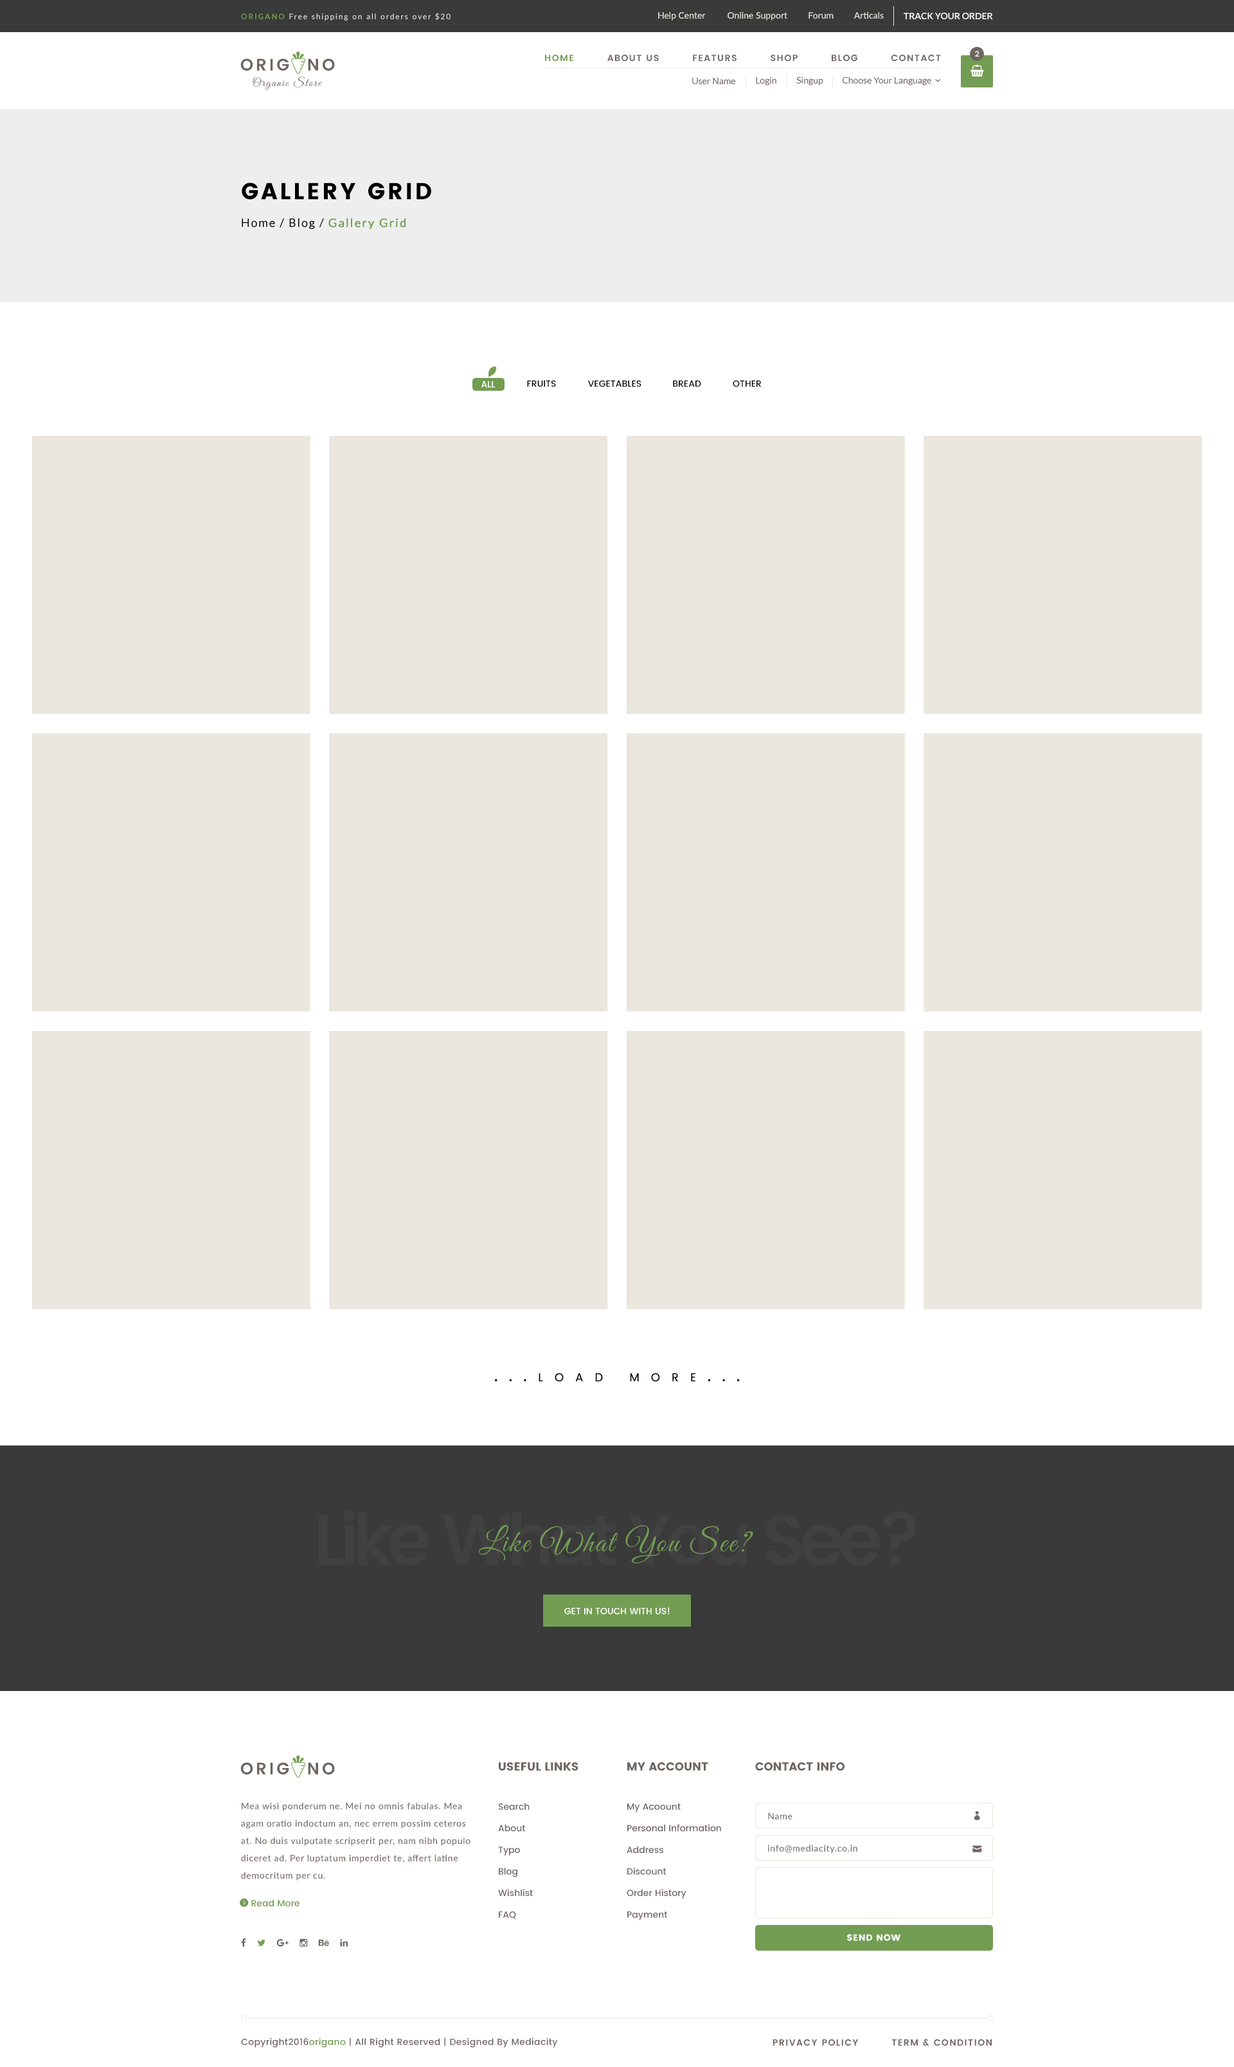
<style>
.page{position:relative;width:1234px;height:2067px;background:#ffffff}
.page>*{position:absolute;margin:0}
.t1{font:7.7px "Lato-Medium";letter-spacing:0.15em;color:#ebe7de}
.t2{font:7.7px "Lato-Bold";letter-spacing:0.15em;color:#739d52}
.t3{font:9px "Lato-Medium";color:#ebe7de}
.t4{font:9px "Lato-Bold";color:#ffffff;text-transform:uppercase}
.t5{font:7.7px "Poppins-Medium";color:#ffffff}
.t6{font:16.7px "Poppins-SemiBold";letter-spacing:0.15em;color:#6f6661}
.t7{font:9px "Poppins-SemiBold";letter-spacing:0.1em;color:#6f6661;text-transform:uppercase}
.t8{font:9px "Poppins-SemiBold";letter-spacing:0.1em;color:#739d52;text-transform:uppercase}
.t9{font:11.6px "GreatVibes-Regular";letter-spacing:0.102em;color:#6f6661}
.t10{font:9px "Lato-Regular";color:#6f6661}
.t11{font:23.1px "Poppins";letter-spacing:0.1em;color:#000000;text-transform:uppercase}
.t12{font:11.6px "Lato-Regular";letter-spacing:0.1em;color:#000000}
.t13{font:11.6px "Lato-Regular";letter-spacing:0.1em;color:#739d52;font-weight:bold}
.t14{font:9px "Poppins-Medium";color:#ffffff;text-transform:uppercase}
.t15{font:9px "Poppins-Medium";color:#000000;text-transform:uppercase}
.t16{font:11.6px "Poppins-Regular";letter-spacing:1em;color:#000000;text-transform:uppercase}
.t17{font:11.6px "Poppins";letter-spacing:1em;color:#000000;text-transform:uppercase}
.t18{font:70.7px "Poppins-Medium";letter-spacing:-0.1em;color:#414141;font-weight:bold}
.t19{font:30.9px "GreatVibes-Regular";letter-spacing:0.05em;color:#739d52}
.t20{font:11.6px "Poppins";color:#6f6661;text-transform:uppercase}
.t21{font:9px/17.4px "Lato-Medium";letter-spacing:0.05em;color:#6f6661}
.t22{font:9px "Poppins-Medium";color:#6f6661}
.t23{font:9px "Lato-Medium";letter-spacing:0.05em;color:#6f6661}
.t24{font:9px "Poppins";letter-spacing:0.05em;color:#ffffff;text-transform:uppercase}
.t25{font:9px "Poppins-Medium";letter-spacing:0.025em;color:#6f6661}
.t26{font:9px "Poppins-Medium";letter-spacing:0.025em;color:#739d52}
</style>
<div class="page">
<p class="t1" style="left:241px;top:13px;width:210px;height:8px"><span class="t2">ORIGANO </span>Free shipping on all orders over $20</p>
<p class="t3" style="left:658px;top:12px;width:48px;height:9px">Help Center</p>
<p class="t3" style="left:728px;top:12px;width:60px;height:9px">Online Support</p>
<p class="t3" style="left:809px;top:12px;width:25px;height:7px">Forum</p>
<p class="t3" style="left:854px;top:12px;width:30px;height:7px">Articals</p>
<p class="t4" style="left:904px;top:12px;width:89px;height:7px">Track Your Order</p>
<p class="t5" style="left:975px;top:51px;width:5px;height:6px">2</p>
<p class="t6" style="left:240px;top:59px;width:95px;height:12px">ORIG  NO</p>
<p class="t7" style="left:545px;top:55px;width:396px;height:6px"><span class="t8">Home         </span>About Us         Featurs         Shop         Blog         Contact</p>
<p class="t9" style="left:253px;top:76px;width:69px;height:14px">Organic Store</p>
<p class="t10" style="left:692px;top:78px;width:43px;height:6px">User Name</p>
<p class="t10" style="left:756px;top:76px;width:21px;height:10px">Login</p>
<p class="t10" style="left:797px;top:76px;width:27px;height:10px">Singup</p>
<p class="t11" style="left:242px;top:183px;width:189px;height:17px">Gallery Grid</p>
<p class="t12" style="left:242px;top:218px;width:164px;height:12px">Home / Blog / <span class="t13">Gallery Grid</span></p>
<p class="t14" style="left:482px;top:381px;width:14px;height:7px">All</p>
<p class="t15" style="left:527px;top:381px;width:29px;height:6px">Fruits</p>
<p class="t15" style="left:588px;top:381px;width:54px;height:6px">Vegetables</p>
<p class="t15" style="left:673px;top:381px;width:28px;height:6px">Bread</p>
<p class="t15" style="left:733px;top:381px;width:28px;height:6px">Other</p>
<p class="t16" style="left:495px;top:1373px;width:245px;height:9px"><span class="t17">...</span>Load More<span class="t17">...</span></p>
<p class="t18" style="left:318px;top:1510px;width:598px;height:56px">Like What You See?</p>
<p class="t19" style="left:478px;top:1525px;width:275px;height:39px">Like What You See?</p>
<p class="t14" style="left:564px;top:1608px;width:106px;height:7px">Get In Touch With Us!</p>
<p class="t6" style="left:240px;top:1763px;width:95px;height:12px">ORIG  NO</p>
<p class="t20" style="left:499px;top:1763px;width:80px;height:8px">Useful Links</p>
<p class="t20" style="left:627px;top:1763px;width:81px;height:8px">My Account</p>
<p class="t20" style="left:755px;top:1763px;width:90px;height:8px">Contact Info</p>
<p class="t21" style="left:241px;top:1803px;width:230px;height:78px">Mea wisi ponderum ne. Mei no omnis fabulas. Mea agam oratio indoctum an, nec errem possim ceteros at. No duis vulputate scripserit per, nam nibh populo diceret ad. Per luptatum imperdiet te, affert latine democritum per cu.</p>
<p class="t22" style="left:498px;top:1803px;width:35px;height:117px">Search<br><br>About<br><br>Typo<br><br>Blog<br><br>Wishlist<br><br>FAQ</p>
<p class="t22" style="left:627px;top:1804px;width:94px;height:117px">My Acoount<br><br>Personal Information<br><br>Address<br><br>Discount<br><br>Order History<br><br>Payment</p>
<p class="t23" style="left:768px;top:1813px;width:25px;height:7px">Name</p>
<p class="t23" style="left:768px;top:1845px;width:90px;height:9px">info@mediacity.co.in</p>
<p class="t24" style="left:847px;top:1934px;width:54px;height:7px">Send Now</p>
<p class="t25" style="left:241px;top:2038px;width:317px;height:10px">Copyright2016<span class="t26">origano </span>| All Right Reserved | Designed By Mediacity</p>
<p class="t7" style="left:773px;top:2039px;width:219px;height:7px">Privacy Policy         Term &amp; Condition</p>
</div>
